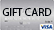
<style>
.page{position:relative;width:54px;height:30px}
.page>*{position:absolute;margin:0}
.t1{font:11px "MyriadPro-Regular";color:#000309}
</style>
<div class="page">
<p class="t1" style="left:2px;top:8px;width:50px;height:8px">GIFT CARD</p>
</div>
